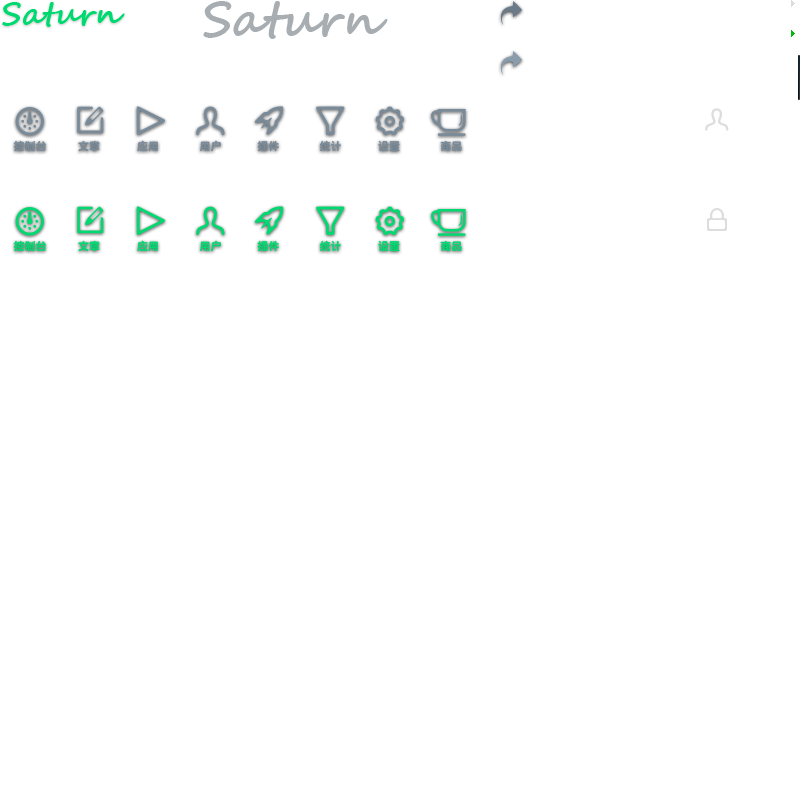
<style>
.page{position:relative;width:800px;height:800px;background:#ffffff}
.page>*{position:absolute;margin:0}
.t1{font:32px "SegoeScript-Bold";color:#00d970}
.t2{font:48px "SegoeScript-Bold";color:#a7adb1}
.t3{font:11px "DFYuanHKW9";color:#798a99}
.t4{font:11px "DFYuanHKW9";color:#00d970}
</style>
<div class="page">
<p class="t1" style="left:2px;top:2px;width:123px;height:25px">Saturn</p>
<p class="t2" style="left:203px;top:1px;width:185px;height:38px">Saturn</p>
<p class="t3" style="left:13px;top:140px;width:449px;height:12px">控制台         文章         应用            用户         插件         统计         设置           商品</p>
<p class="t4" style="left:13px;top:240px;width:449px;height:12px">控制台         文章         应用            用户         插件         统计         设置           商品</p>
</div>
